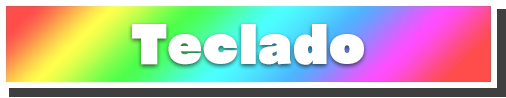
<style>
.page{position:relative;width:506px;height:98px}
.page>*{position:absolute;margin:0}
.t1{font:48px "RaglanPunchStd-UB";letter-spacing:0.029em;color:#ffffff}
</style>
<div class="page">
<p class="t1" style="left:132px;top:24px;width:232px;height:41px">Teclado</p>
</div>
